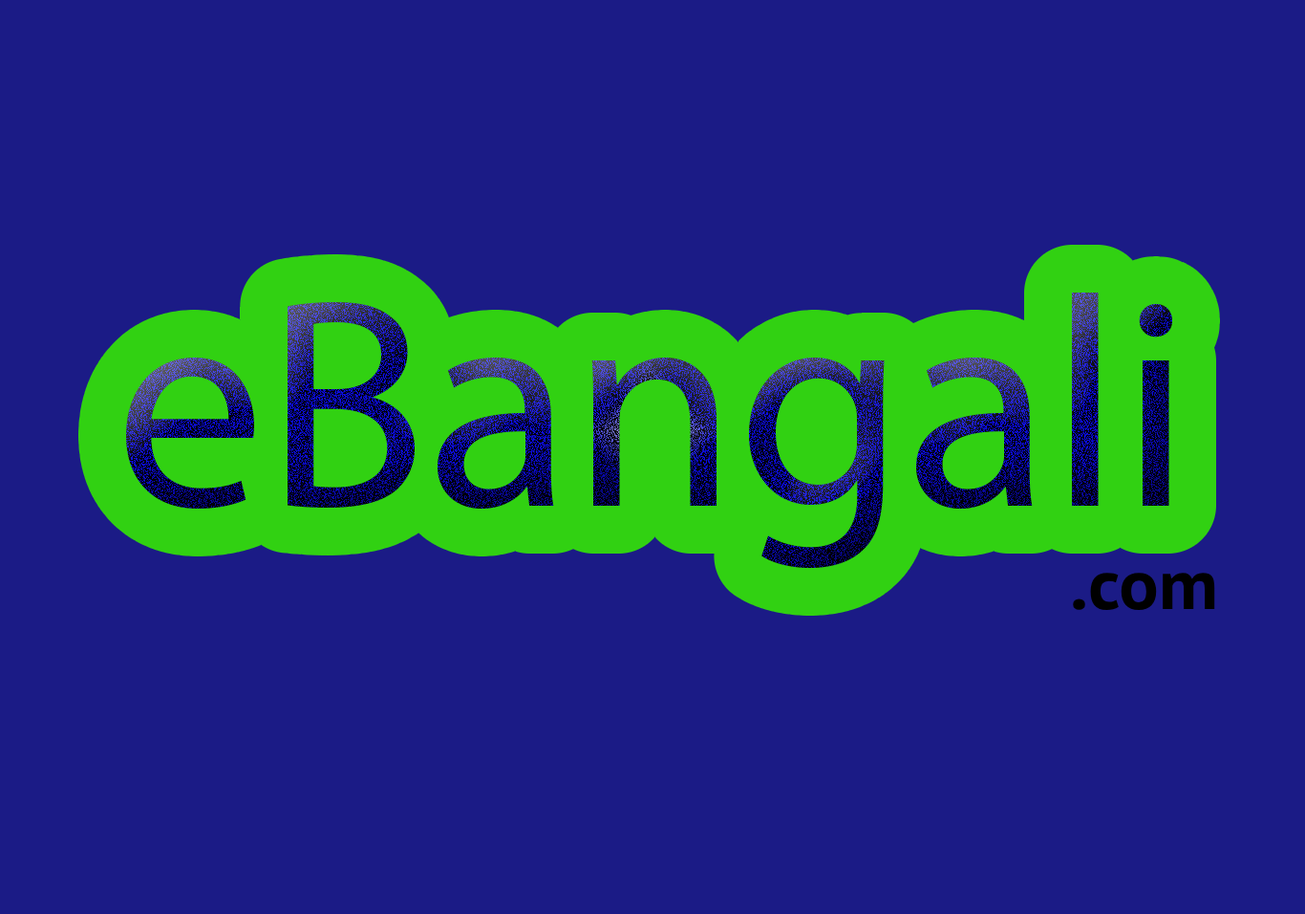
<style>
.page{position:relative;width:1305px;height:914px;background:#1b1b86}
.page>*{position:absolute;margin:0}
.t1{font:299.8px "MyriadPro-Regular"}
.t2{font:70.3px "MyriadPro-Bold";color:#000000;scale:1.05 1}
</style>
<div class="page">
<p class="t1" style="left:126px;top:292px;width:1046px;height:277px">eBangali</p>
<p class="t2" style="left:1073px;top:572px;width:142px;height:39px">.com</p>
</div>
